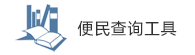
<style>
.page{position:relative;width:195px;height:55px;background:#ffffff}
.page>*{position:absolute;margin:0}
.t1{font:16.7px "HarmonyOS_Sans_SC";color:#333333}
</style>
<div class="page">
<p class="t1" style="left:77px;top:20px;width:100px;height:16px">便民查询工具</p>
</div>
